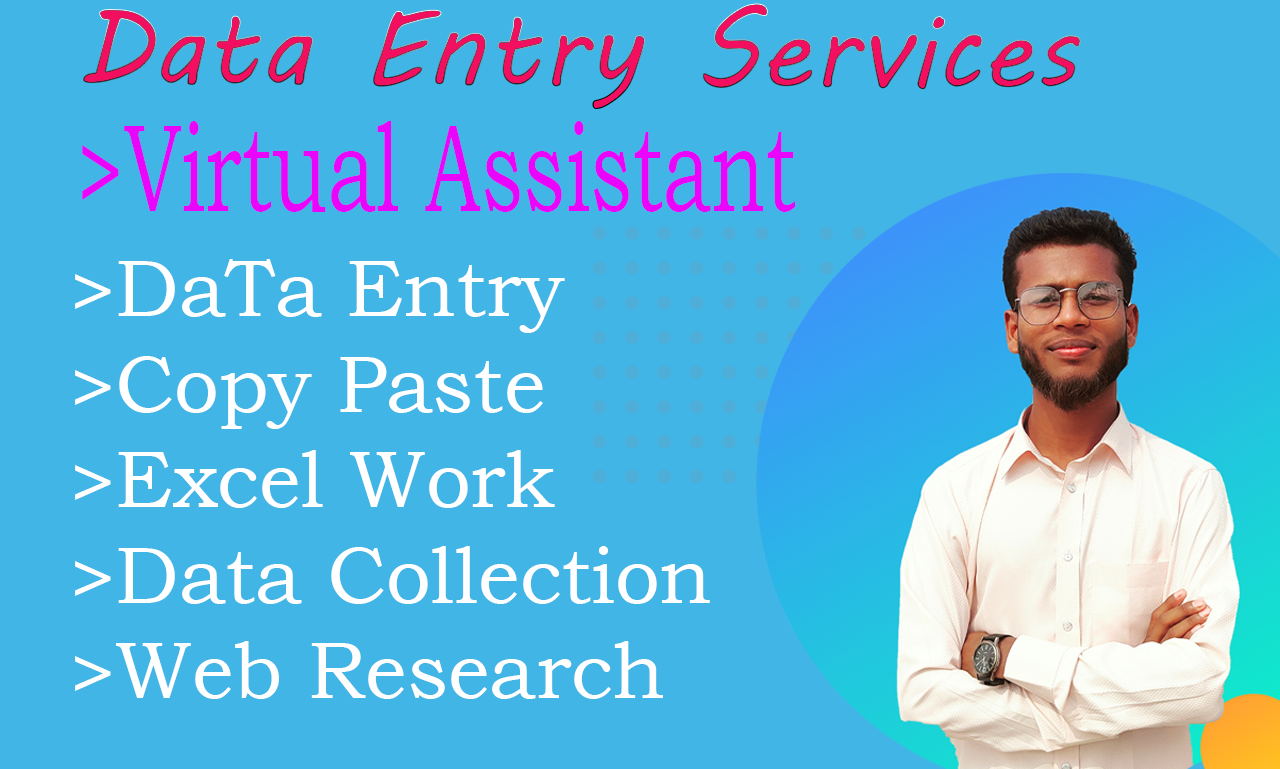
<style>
.page{position:relative;width:1280px;height:769px;background:#42b5e7}
.page>*{position:absolute;margin:0}
.t1{font:106.1px "MVBoli";color:#f20f5f}
.t2{font:125.5px "BookmanOldStyle";color:#e905f9;scale:0.65 1}
.t3{font:79.5px "BookmanOldStyle";color:#ffffff}
</style>
<div class="page">
<p class="t1" style="left:83px;top:3px;width:998px;height:106px">Data Entry Services</p>
<p class="t2" style="left:82px;top:121px;width:713px;height:91px">&gt;Virtual Assistant</p>
<p class="t3" style="left:75px;top:259px;width:635px;height:440px">&gt;DaTa Entry<br>&gt;Copy Paste<br>&gt;Excel Work<br>&gt;Data Collection<br>&gt;Web Research</p>
</div>
